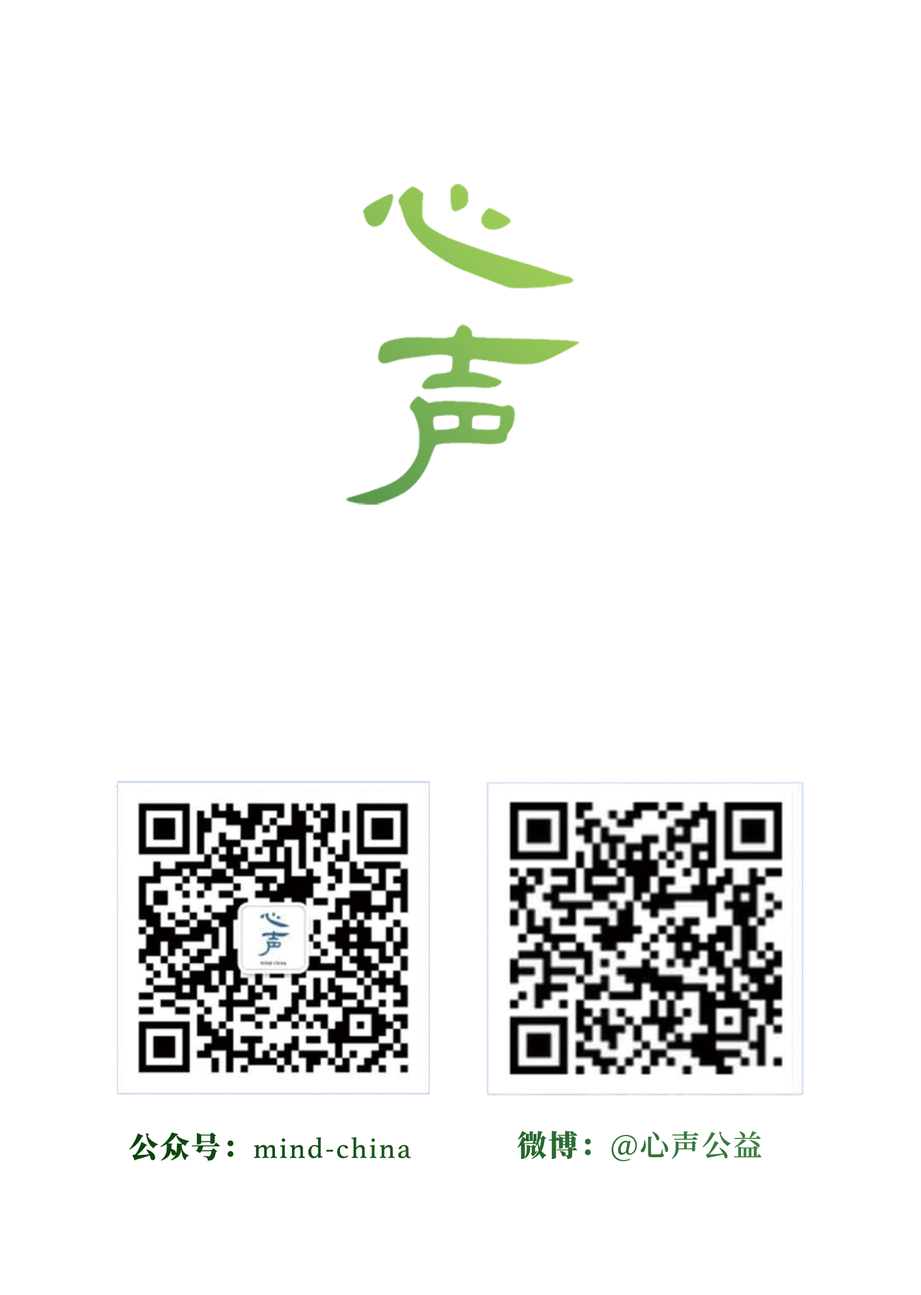
<style>
.page{position:relative;width:921px;height:1295px;background:#ffffff}
.page>*{position:absolute;margin:0}
.t1{font:29.3px "Athelas-Regular";letter-spacing:0.06em;color:#104a11}
.t2{font:29.3px "NotoSerifCJKsc-Black";letter-spacing:0.06em;color:#104a11;font-variant:small-caps}
.t3{font:29.3px "NotoSerifCJKsc-SemiBold";letter-spacing:0.06em;color:#2f6f35}
.t4{font:29.3px "NotoSerifCJKsc-Black";letter-spacing:0.06em;color:#2f6f35;font-variant:small-caps}
</style>
<div class="page">
<p class="t1" style="left:129px;top:1132px;width:282px;height:29px"><span class="t2">公众号：</span>mind-china</p>
<p class="t3" style="left:517px;top:1131px;width:244px;height:30px"><span class="t4">微博：</span>@心声公益</p>
</div>
